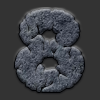
<style>
.page{position:relative;width:100px;height:100px;background:#333333}
.page>*{position:absolute;margin:0}
.t1{font:100px "JFRockSolid"}
</style>
<div class="page">
<p class="t1" style="left:15px;top:9px;width:69px;height:83px">8</p>
</div>
